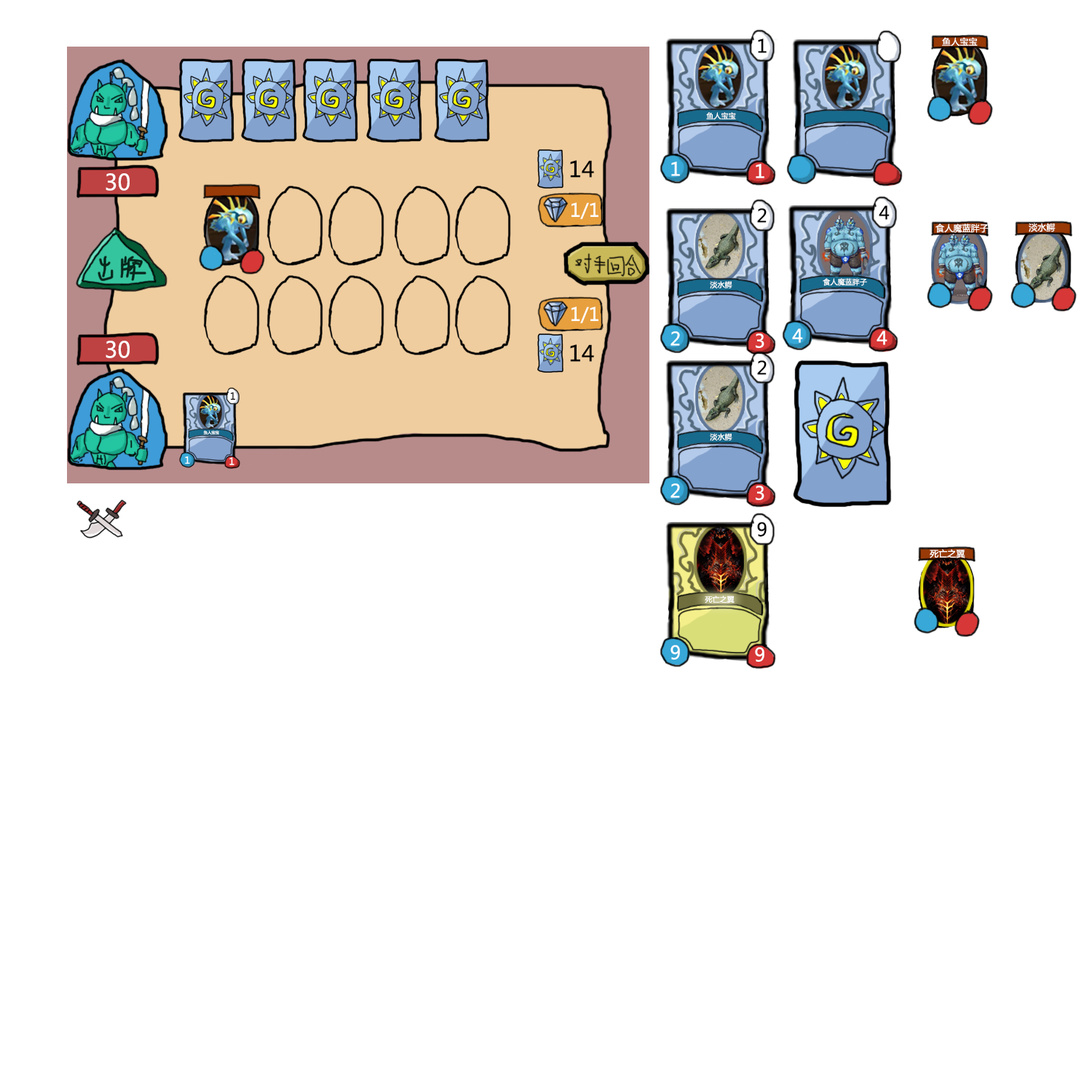
<style>
.page{position:relative;width:1092px;height:1092px;background:#ffffff}
.page>*{position:absolute;margin:0}
.t1{font:18.2px "MicrosoftYaHei";letter-spacing:0.01em;color:#010101}
.t2{font:8.7px "MicrosoftYaHei";letter-spacing:0.01em;color:#fffffe}
.t3{font:7.3px "MicrosoftYaHei";letter-spacing:0.01em;color:#ffffff}
.t4{font:21.8px "MicrosoftYaHei";letter-spacing:0.01em;color:#000000}
.t5{font:18.2px "MicrosoftYaHei";letter-spacing:0.01em;color:#ffffff}
.t6{font:21.8px "MicrosoftYaHei";letter-spacing:0.01em;color:#ffffff}
.t7{font:18.2px "MicrosoftYaHei";letter-spacing:0.01em;color:#fffffe}
.t8{font:9.5px "MicrosoftYaHei";letter-spacing:0.01em;color:#010101}
.t9{font:3.8px "MicrosoftYaHei";letter-spacing:0.01em;color:#ffffff}
.t10{font:9.5px "MicrosoftYaHei";letter-spacing:0.01em;color:#ffffff}
</style>
<div class="page">
<p class="t1" style="left:758px;top:39px;width:9px;height:14px">1</p>
<p class="t2" style="left:942px;top:37px;width:36px;height:10px">鱼人宝宝</p>
<p class="t3" style="left:706px;top:112px;width:30px;height:8px">鱼人宝宝</p>
<p class="t4" style="left:570px;top:160px;width:24px;height:18px">14</p>
<p class="t5" style="left:671px;top:162px;width:9px;height:14px">1</p>
<p class="t6" style="left:106px;top:173px;width:24px;height:18px">30</p>
<p class="t5" style="left:756px;top:164px;width:8px;height:14px">1</p>
<p class="t7" style="left:571px;top:202px;width:27px;height:17px">1/1</p>
<p class="t1" style="left:757px;top:208px;width:10px;height:15px">2</p>
<p class="t1" style="left:879px;top:205px;width:11px;height:15px">4</p>
<p class="t2" style="left:935px;top:223px;width:54px;height:10px">食人魔蓝胖子</p>
<p class="t2" style="left:1029px;top:223px;width:27px;height:9px">淡水鳄</p>
<p class="t3" style="left:710px;top:281px;width:22px;height:8px">淡水鳄</p>
<p class="t3" style="left:823px;top:278px;width:44px;height:8px">食人魔蓝胖子</p>
<p class="t7" style="left:571px;top:306px;width:27px;height:17px">1/1</p>
<p class="t5" style="left:792px;top:328px;width:11px;height:15px">4</p>
<p class="t6" style="left:106px;top:341px;width:24px;height:17px">30</p>
<p class="t5" style="left:670px;top:331px;width:10px;height:15px">2</p>
<p class="t5" style="left:756px;top:333px;width:8px;height:15px">3</p>
<p class="t5" style="left:877px;top:331px;width:10px;height:14px">4</p>
<p class="t4" style="left:570px;top:344px;width:24px;height:18px">14</p>
<p class="t1" style="left:757px;top:360px;width:10px;height:15px">2</p>
<p class="t8" style="left:231px;top:392px;width:4px;height:8px">1</p>
<p class="t9" style="left:203px;top:430px;width:16px;height:5px">鱼人宝宝</p>
<p class="t3" style="left:710px;top:433px;width:22px;height:8px">淡水鳄</p>
<p class="t10" style="left:185px;top:456px;width:5px;height:8px">1</p>
<p class="t10" style="left:229px;top:457px;width:5px;height:8px">1</p>
<p class="t5" style="left:670px;top:483px;width:10px;height:15px">2</p>
<p class="t5" style="left:756px;top:486px;width:8px;height:14px">3</p>
<p class="t1" style="left:757px;top:522px;width:10px;height:15px">9</p>
<p class="t2" style="left:930px;top:549px;width:35px;height:9px">死亡之翼</p>
<p class="t3" style="left:705px;top:595px;width:30px;height:9px">死亡之翼</p>
<p class="t5" style="left:670px;top:645px;width:10px;height:15px">9</p>
<p class="t5" style="left:755px;top:647px;width:9px;height:15px">9</p>
</div>
